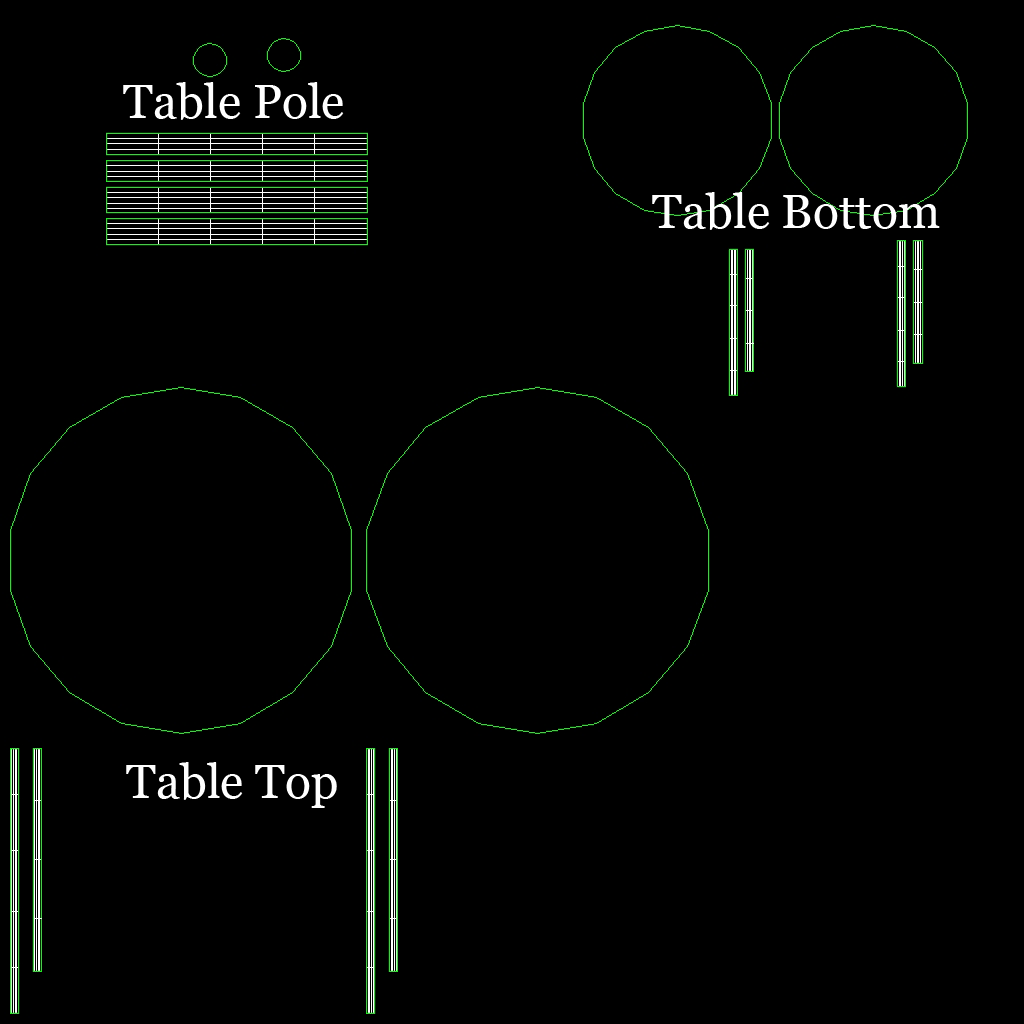
<style>
.page{position:relative;width:1024px;height:1024px;background:#000000}
.page>*{position:absolute;margin:0}
.t1{font:48px "Georgia";color:#ffffff}
</style>
<div class="page">
<p class="t1" style="left:123px;top:82px;width:221px;height:38px">Table Pole</p>
<p class="t1" style="left:652px;top:192px;width:288px;height:38px">Table Bottom</p>
<p class="t1" style="left:126px;top:762px;width:211px;height:46px">Table Top</p>
</div>
